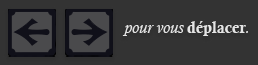
<style>
.page{position:relative;width:258px;height:65px;background:#333333}
.page>*{position:absolute;margin:0}
.t1{font:16px "CalistoMT-Italic";color:#e5e5e5}
.t2{font:16px "CalisMTBol";color:#e5e5e5}
</style>
<div class="page">
<p class="t1" style="left:122px;top:21px;width:126px;height:15px">pour vous <span class="t2">déplacer</span>.</p>
</div>
